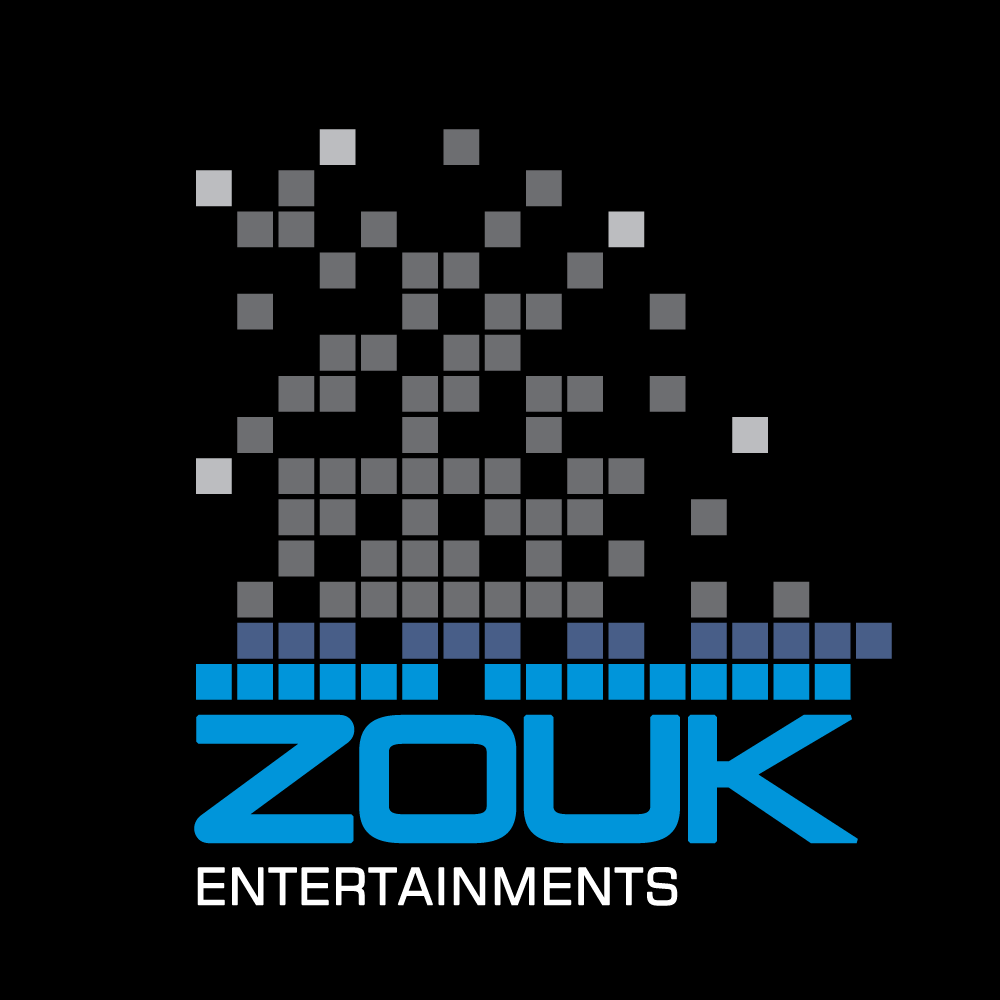
<style>
.page{position:relative;width:1000px;height:1000px;background:#000000}
.page>*{position:absolute;margin:0}
.t1{font:167.2px "VenusRising-Regular";letter-spacing:-0.08em;color:#0095da;font-weight:bold}
.t2{font:50px "Square721BT-Roman";letter-spacing:0.02em;color:#ffffff;font-weight:bold}
</style>
<div class="page">
<p class="t1" style="left:194px;top:714px;width:664px;height:130px">zouk</p>
<p class="t2" style="left:197px;top:867px;width:481px;height:39px">ENTERTAINMENTS</p>
</div>
